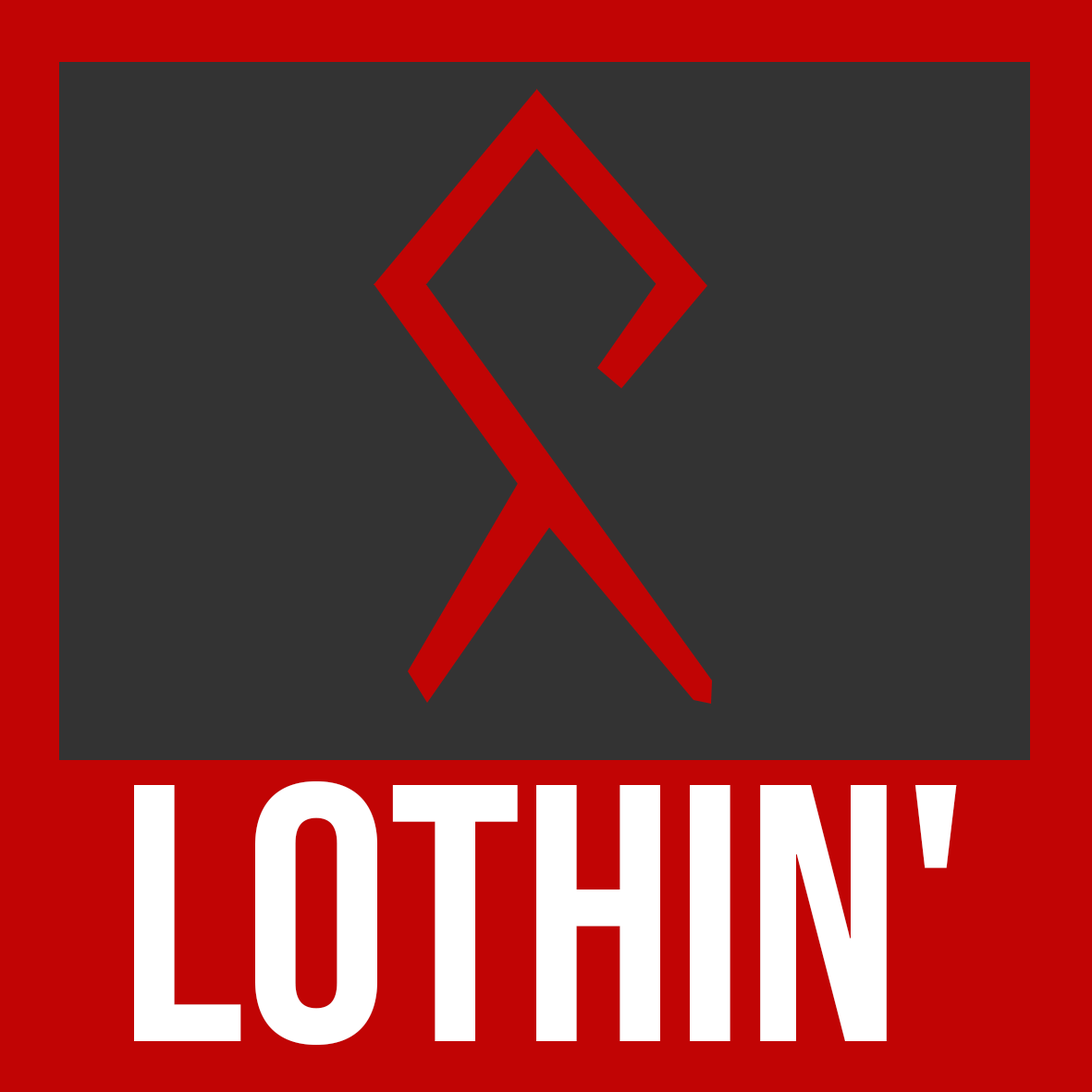
<style>
.page{position:relative;width:1092px;height:1092px;background:#333333}
.page>*{position:absolute;margin:0}
.t1{font:366px "BebasNeue-Regular";color:#ffffff}
</style>
<div class="page">
<p class="t1" style="left:134px;top:781px;width:823px;height:264px">LOTHIN'</p>
</div>
